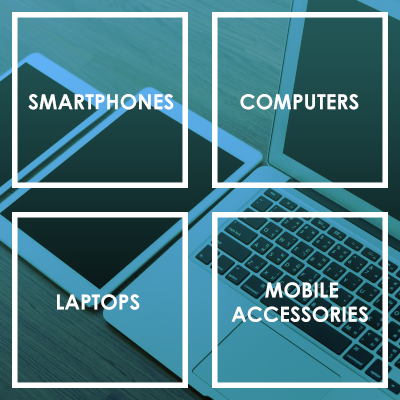
<style>
.page{position:relative;width:400px;height:400px}
.page>*{position:absolute;margin:0}
.t1{font:20.8px "CenturyGothic-Bold";color:#ffffff}
</style>
<div class="page">
<p class="t1" style="left:28px;top:94px;width:146px;height:16px">SMARTPHONES</p>
<p class="t1" style="left:240px;top:94px;width:119px;height:16px">COMPUTERS</p>
<p class="t1" style="left:57px;top:294px;width:83px;height:16px">LAPTOPS</p>
<p class="t1" style="left:265px;top:282px;width:73px;height:16px">MOBILE</p>
<p class="t1" style="left:231px;top:306px;width:137px;height:16px">ACCESSORIES</p>
</div>
